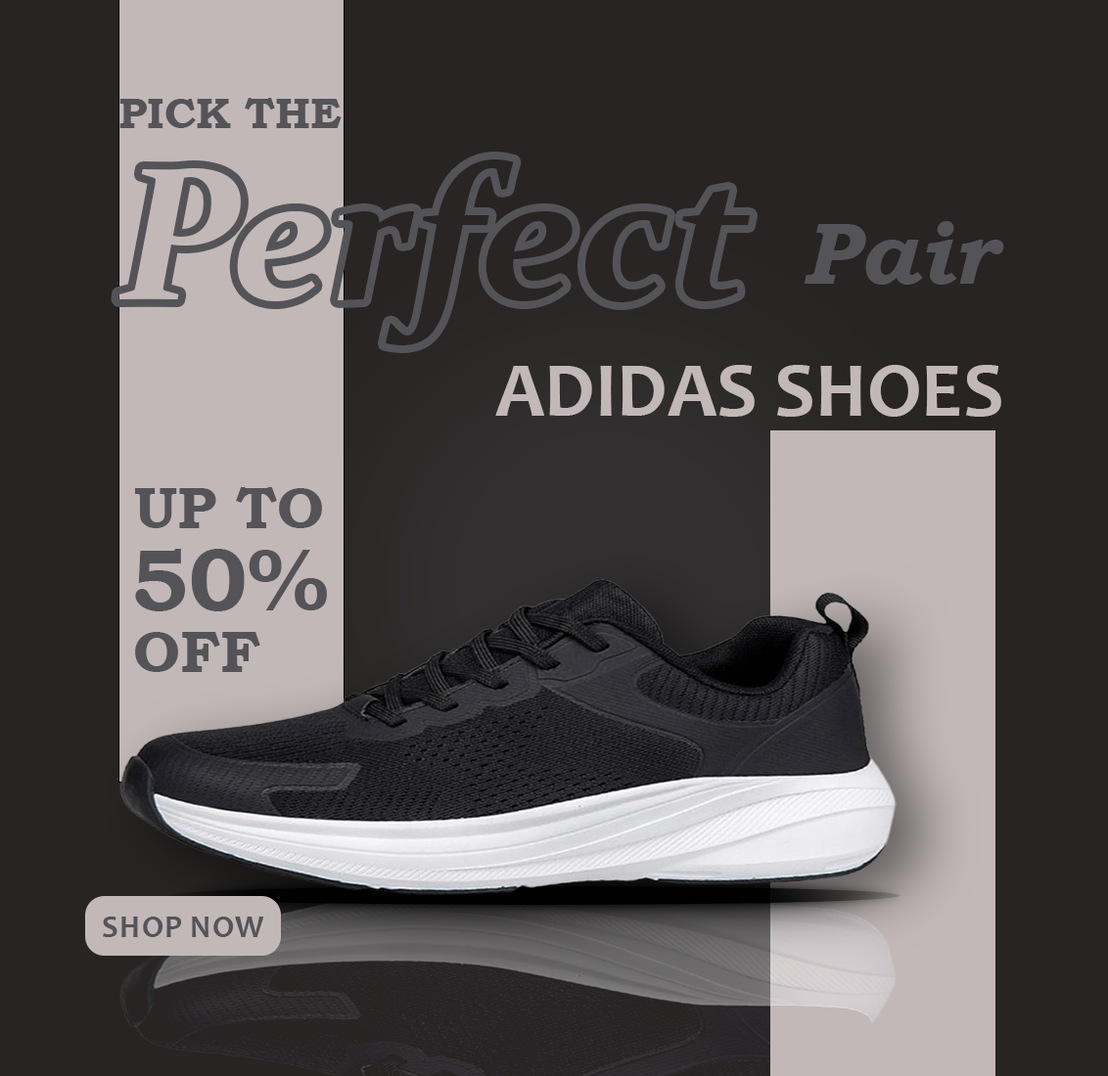
<style>
.page{position:relative;width:1108px;height:1076px;background:#272423}
.page>*{position:absolute;margin:0}
.t1{font:43.1px "BookmanOldStyle-Bold";color:#545458}
.t2{font:88.1px "BookmanOldStyle-BoldItalic";color:#545458}
.t3{font:78.3px "Candara-Bold";color:#c2b8b8}
.t4{font:58.7px "BookmanOldStyle-Bold";color:#545458;text-transform:uppercase}
.t5{font:88.1px "BookmanOldStyle-Bold";color:#545458;text-transform:uppercase}
.t6{font:31.3px "Candara-Bold";color:#545458;text-transform:uppercase}
</style>
<div class="page">
<p class="t1" style="left:119px;top:98px;width:223px;height:30px">PICK THE</p>
<p class="t2" style="left:803px;top:221px;width:201px;height:64px">Pair</p>
<p class="t3" style="left:495px;top:365px;width:506px;height:52px">ADIDAS SHOES</p>
<p class="t4" style="left:135px;top:487px;width:187px;height:41px">UP TO</p>
<p class="t5" style="left:135px;top:549px;width:192px;height:63px">50%</p>
<p class="t4" style="left:135px;top:632px;width:125px;height:40px">OFF</p>
<p class="t6" style="left:103px;top:917px;width:161px;height:20px">SHOP NOW</p>
</div>
